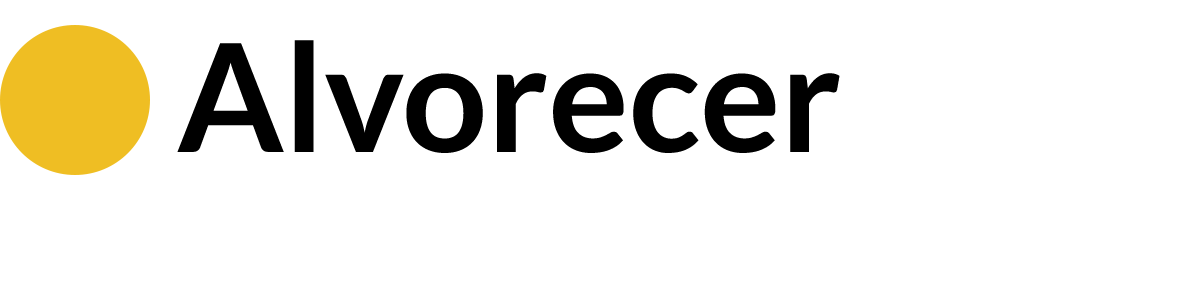
<style>
.page{position:relative;width:1200px;height:300px;background:#ffffff}
.page>*{position:absolute;margin:0}
.t1{font:150px "Lato-Bold";color:#000000}
</style>
<div class="page">
<p class="t1" style="left:177px;top:40px;width:663px;height:113px">Alvorecer</p>
</div>
